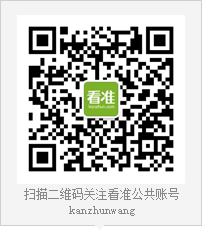
<style>
.page{position:relative;width:202px;height:232px;background:#f4f4f4}
.page>*{position:absolute;margin:0}
.t1{font:12px/16.1px "SimSun";color:#898888}
</style>
<div class="page">
<p class="t1" style="left:24px;top:188px;width:155px;height:28px;text-align:center">扫描二维码关注看准公共账号<br>kanzhunwang</p>
</div>
